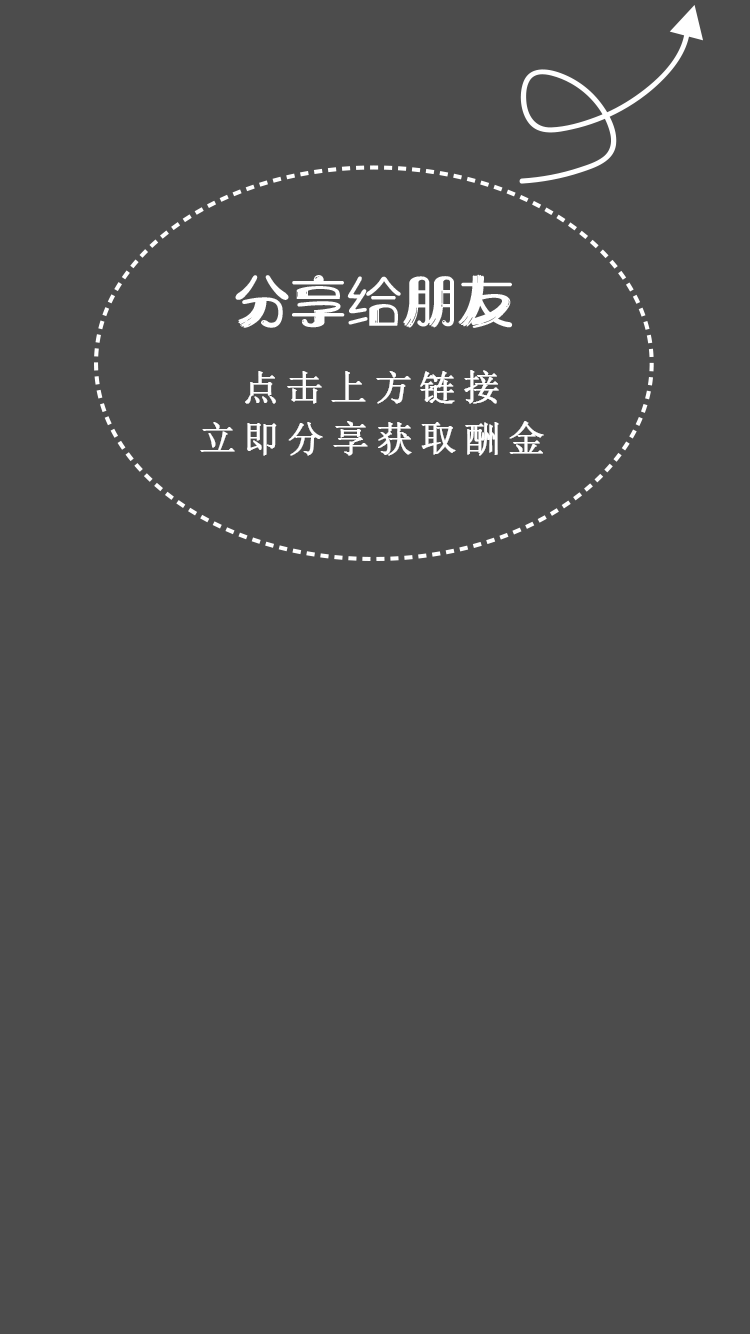
<style>
.page{position:relative;width:750px;height:1334px;background:#4c4c4c}
.page>*{position:absolute;margin:0}
.t1{font:36px "NSimSun";letter-spacing:0.2em;color:#ffffff;font-weight:bold}
</style>
<div class="page">
<p class="t1" style="left:245px;top:370px;width:254px;height:34px">点击上方链接</p>
<p class="t1" style="left:200px;top:421px;width:344px;height:35px">立即分享获取酬金</p>
</div>
